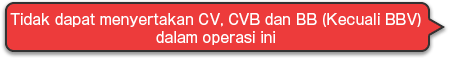
<style>
.page{position:relative;width:450px;height:58px;background:#ed3b3b}
.page>*{position:absolute;margin:0}
.t1{font:14px/18px "GothicMB101Pro-Regular";color:#ffffff}
</style>
<div class="page">
<p class="t1" style="left:10px;top:13px;width:411px;height:32px;text-align:center">Tidak dapat menyertakan CV, CVB dan BB (Kecuali BBV)<br>dalam operasi ini</p>
</div>
